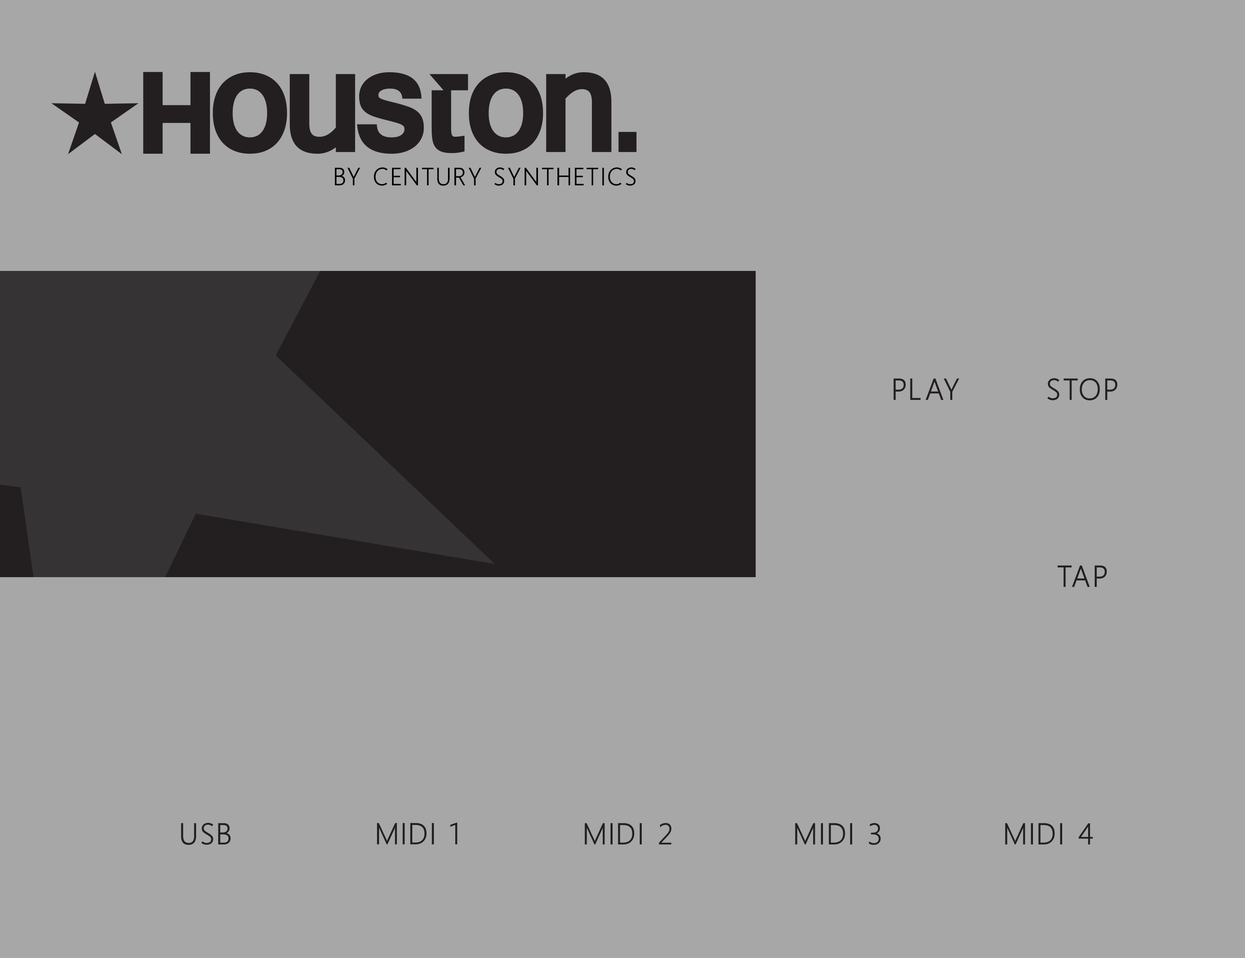
<style>
.page{position:relative;width:1245px;height:958px;background:#a7a7a7}
.page>*{position:absolute;margin:0}
.t1{font:25.2px "Homizio";letter-spacing:0.12em;color:#000000}
.t2{font:30.6px "Homizio";letter-spacing:0.12em;color:#231f20}
.t3{font:30.4px "Homizio";letter-spacing:0.12em;color:#231f20}
</style>
<div class="page">
<p class="t1" style="left:335px;top:167px;width:301px;height:19px">BY CENTURY SYNTHETICS</p>
<p class="t2" style="left:1047px;top:378px;width:70px;height:22px">STOP</p>
<p class="t2" style="left:894px;top:378px;width:65px;height:22px">PLAY</p>
<p class="t2" style="left:1057px;top:565px;width:50px;height:22px">TAP</p>
<p class="t3" style="left:377px;top:822px;width:80px;height:22px">MIDI 1</p>
<p class="t3" style="left:181px;top:822px;width:50px;height:23px">USB</p>
<p class="t3" style="left:585px;top:823px;width:86px;height:21px">MIDI 2</p>
<p class="t3" style="left:795px;top:823px;width:86px;height:22px">MIDI 3</p>
<p class="t3" style="left:1005px;top:823px;width:88px;height:21px">MIDI 4</p>
</div>
